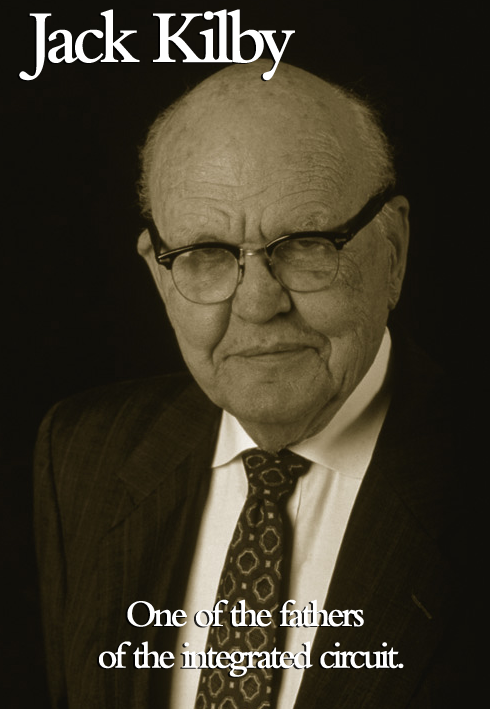
<style>
.page{position:relative;width:490px;height:709px}
.page>*{position:absolute;margin:0}
.t1{font:78px "BemboMT-SemiBold";letter-spacing:-0.08em;color:#ffffff;scale:0.95 1}
.t2{font:39px/41.7px "BemboMT-SemiBold";letter-spacing:-0.08em;color:#ffffff;scale:0.95 1}
</style>
<div class="page">
<p class="t1" style="left:19px;top:9px;width:276px;height:72px">Jack Kilby</p>
<p class="t2" style="left:99px;top:599px;width:305px;height:78px;text-align:center">One of the fathers <br>of the integrated circuit.</p>
</div>
